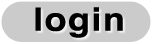
<style>
.page{position:relative;width:152px;height:44px;background:#cbcbcb}
.page>*{position:absolute;margin:0}
.t1{font:32px "Helvetica-Bold";letter-spacing:0.04em;color:#010101;scale:1.12 1}
</style>
<div class="page">
<p class="t1" style="left:35px;top:7px;width:88px;height:31px">login</p>
</div>
